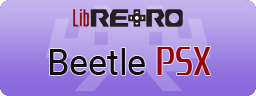
<style>
.page{position:relative;width:256px;height:96px}
.page>*{position:absolute;margin:0}
.t1{font:36px "Roboto-Regular";color:#100e0e}
.t2{font:48px "Zrnic";color:#960606}
</style>
<div class="page">
<p class="t1" style="left:50px;top:48px;width:95px;height:27px">Beetle</p>
<p class="t2" style="left:157px;top:47px;width:54px;height:28px">PSX</p>
</div>
